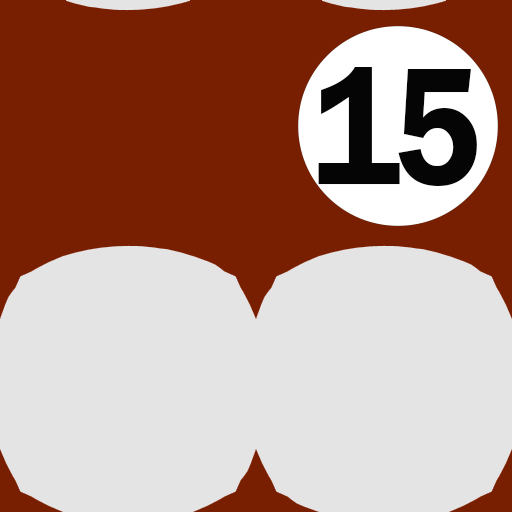
<style>
.page{position:relative;width:512px;height:512px;background:#e4e4e4}
.page>*{position:absolute;margin:0}
.t1{font:172.5px "FranklinGothic-Demi";letter-spacing:-0.05em;color:#060505;scale:0.87 1}
</style>
<div class="page">
<p class="t1" style="left:318px;top:67px;width:159px;height:119px">15</p>
</div>
